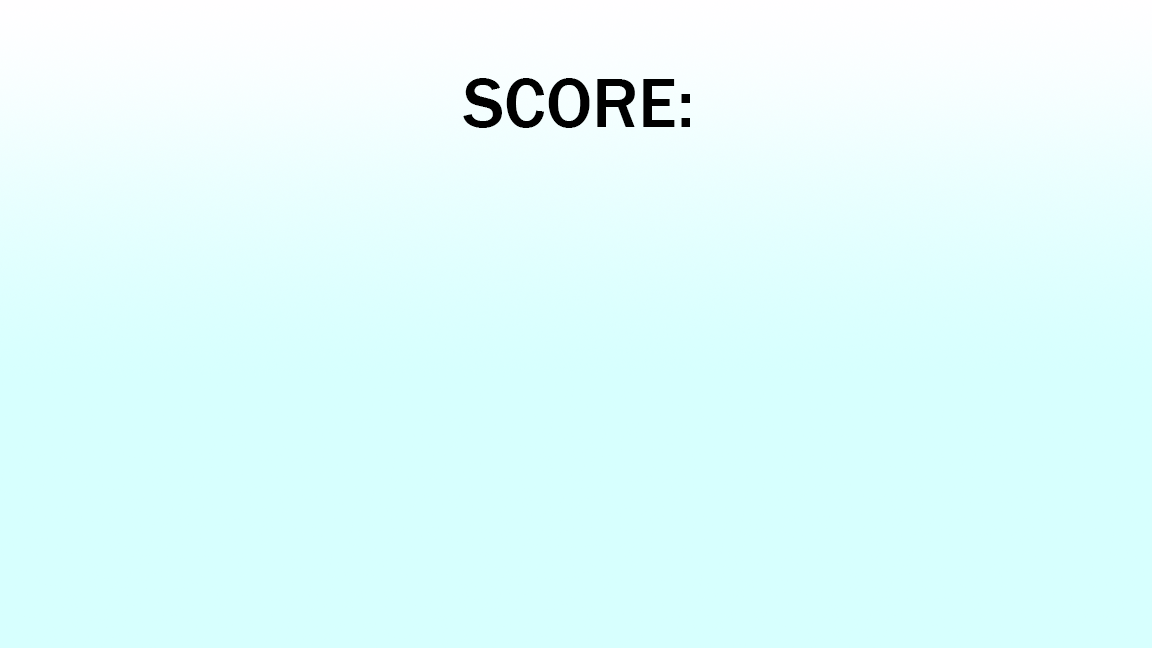
<style>
.page{position:relative;width:1152px;height:648px;background:#d7fffe}
.page>*{position:absolute;margin:0}
.t1{font:72px "FranklinGothic-Medium";color:#000000}
</style>
<div class="page">
<p class="t1" style="left:463px;top:78px;width:227px;height:50px">SCORE:</p>
</div>
